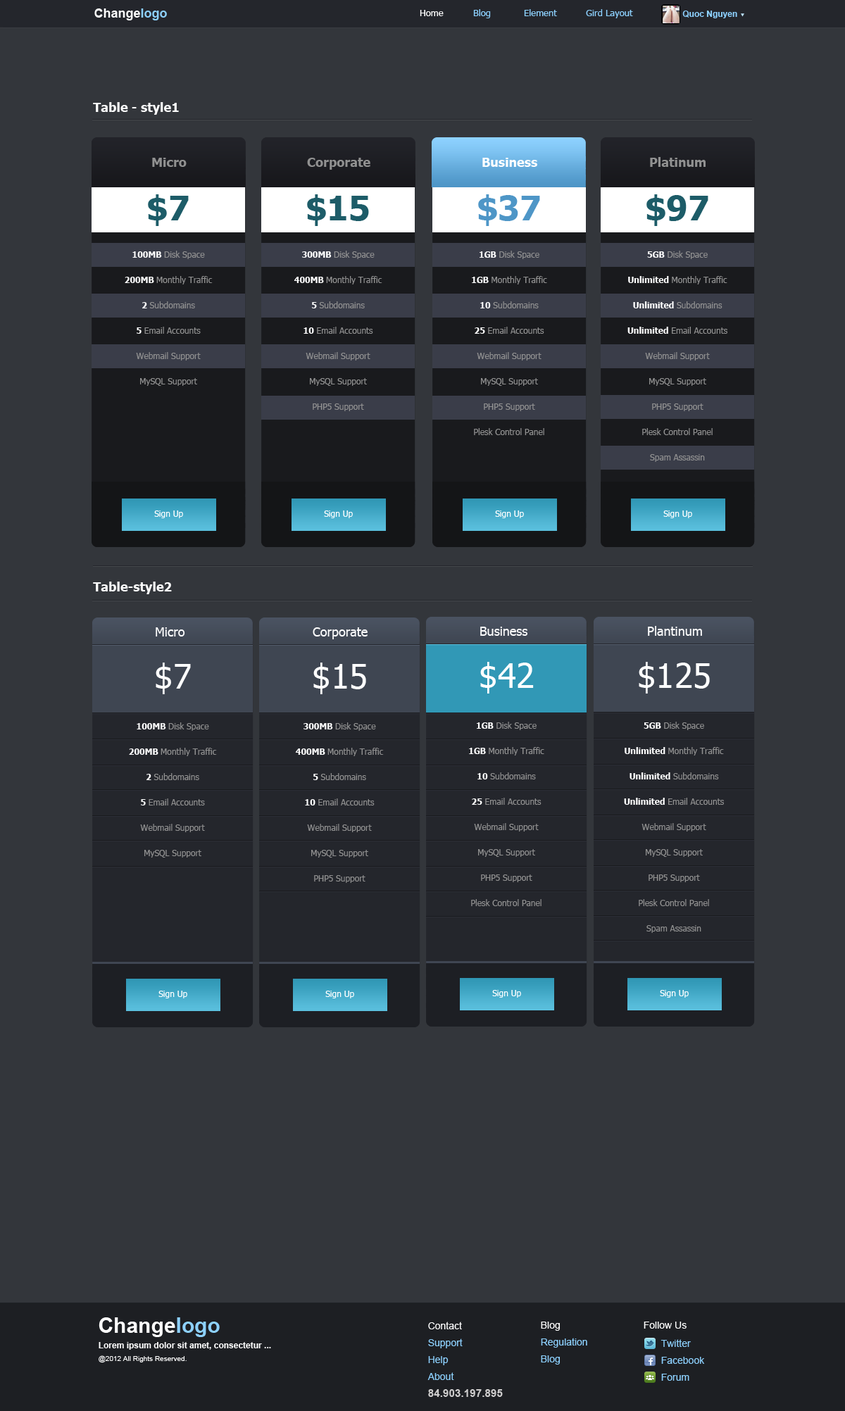
<style>
.page{position:relative;width:845px;height:1411px;background:#33363b}
.page>*{position:absolute;margin:0}
.t1{font:12.7px "Arial-BoldMT";color:#ffffff}
.t2{font:12.7px "Arial-BoldMT";color:#8dd1ff}
.t3{font:9.2px "Tahoma";color:#8dd1ff}
.t4{font:9.2px "Tahoma";color:#ffffff}
.t5{font:8.5px "Arial-BoldMT";color:#8dd1ff}
.t6{font:12.7px "Tahoma-Bold";color:#ffffff}
.t7{font:12.7px "Tahoma-Bold";color:#919191}
.t8{font:33.8px "Tahoma-Bold";color:#1d5c68}
.t9{font:33.8px "Tahoma-Bold";color:#4e96c7}
.t10{font:8.5px/25.4px "Tahoma";color:#919191}
.t11{font:8.5px/25.4px "Tahoma-Bold";color:#ffffff}
.t12{font:8.5px "Tahoma";color:#ffffff}
.t13{font:12.7px "Tahoma";color:#ffffff}
.t14{font:33.8px "Tahoma";color:#ffffff}
.t15{font:21.1px "Arial-BoldMT";color:#ffffff}
.t16{font:21.1px "Arial-BoldMT";color:#8dd1ff}
.t17{font:9.9px/16.9px "ArialMT";color:#8dd1ff}
.t18{font:9.9px/16.9px "ArialMT";color:#ffffff}
.t19{font:10.6px/16.9px "Arial-BoldMT";letter-spacing:0.01em;color:#cecdcd}
.t20{font:9.9px "ArialMT";color:#ffffff}
.t21{font:8.5px/12.7px "Arial-BoldMT";color:#ffffff}
.t22{font:7px/12.7px "ArialMT";color:#ffffff}
</style>
<div class="page">
<p class="t1" style="left:94px;top:8px;width:73px;height:12px">Change<span class="t2">logo</span></p>
<p class="t3" style="left:420px;top:9px;width:213px;height:9px"><span class="t4">Home</span>   Blog    Element      Gird Layout</p>
<p class="t5" style="left:682px;top:11px;width:55px;height:7px">Quoc Nguyen</p>
<p class="t6" style="left:93px;top:102px;width:86px;height:13px">Table - style1</p>
<p class="t7" style="left:152px;top:158px;width:35px;height:9px">Micro</p>
<p class="t7" style="left:307px;top:158px;width:63px;height:12px">Corporate</p>
<p class="t6" style="left:482px;top:158px;width:55px;height:9px">Business</p>
<p class="t7" style="left:650px;top:157px;width:56px;height:10px">Platinum</p>
<p class="t8" style="left:148px;top:194px;width:41px;height:32px">$7</p>
<p class="t8" style="left:307px;top:194px;width:62px;height:32px">$15</p>
<p class="t9" style="left:478px;top:194px;width:62px;height:32px">$37</p>
<p class="t8" style="left:646px;top:194px;width:62px;height:32px">$97</p>
<p class="t10" style="left:125px;top:251px;width:88px;height:135px;text-align:center"><span class="t11">100MB</span> Disk Space<br><span class="t11">200MB </span>Monthly Traffic<br><span class="t11">2</span> Subdomains<br><span class="t11">5</span> Email Accounts<br>Webmail Support<br>MySQL Support</p>
<p class="t10" style="left:294px;top:251px;width:88px;height:160px;text-align:center"><span class="t11">300MB</span> Disk Space<br><span class="t11">400MB </span>Monthly Traffic<br><span class="t11">5</span> Subdomains<br><span class="t11">10</span> Email Accounts<br>Webmail Support<br>MySQL Support<br>PHP5 Support</p>
<p class="t10" style="left:472px;top:251px;width:75px;height:184px;text-align:center"><span class="t11">1GB</span> Disk Space<br><span class="t11">1GB </span>Monthly Traffic<br><span class="t11">10</span> Subdomains<br><span class="t11">25</span> Email Accounts<br>Webmail Support<br>MySQL Support<br>PHP5 Support<br>Plesk Control Panel</p>
<p class="t10" style="left:627px;top:251px;width:100px;height:211px;text-align:center"><span class="t11">5GB</span> Disk Space<br><span class="t11">Unlimited </span>Monthly Traffic<br><span class="t11">Unlimited</span> Subdomains<br><span class="t11">Unlimited</span> Email Accounts<br>Webmail Support<br>MySQL Support<br>PHP5 Support<br>Plesk Control Panel<br>Spam Assassin</p>
<p class="t12" style="left:154px;top:511px;width:29px;height:7px">Sign Up</p>
<p class="t12" style="left:324px;top:511px;width:29px;height:7px">Sign Up</p>
<p class="t12" style="left:495px;top:511px;width:29px;height:7px">Sign Up</p>
<p class="t12" style="left:663px;top:511px;width:29px;height:7px">Sign Up</p>
<p class="t6" style="left:93px;top:582px;width:79px;height:12px">Table-style2</p>
<p class="t13" style="left:156px;top:627px;width:29px;height:10px">Micro</p>
<p class="t13" style="left:313px;top:627px;width:55px;height:12px">Corporate</p>
<p class="t13" style="left:480px;top:627px;width:47px;height:9px">Business</p>
<p class="t13" style="left:648px;top:626px;width:54px;height:10px">Plantinum</p>
<p class="t14" style="left:156px;top:663px;width:35px;height:31px">$7</p>
<p class="t14" style="left:313px;top:663px;width:53px;height:31px">$15</p>
<p class="t14" style="left:480px;top:662px;width:54px;height:32px">$42</p>
<p class="t14" style="left:639px;top:662px;width:71px;height:32px">$125</p>
<p class="t10" style="left:129px;top:722px;width:88px;height:136px;text-align:center"><span class="t11">100MB</span> Disk Space<br><span class="t11">200MB </span>Monthly Traffic<br><span class="t11">2</span> Subdomains<br><span class="t11">5</span> Email Accounts<br>Webmail Support<br>MySQL Support</p>
<p class="t10" style="left:295px;top:722px;width:89px;height:161px;text-align:center"><span class="t11">300MB</span> Disk Space<br><span class="t11">400MB </span>Monthly Traffic<br><span class="t11">5</span> Subdomains<br><span class="t11">10</span> Email Accounts<br>Webmail Support<br>MySQL Support<br>PHP5 Support</p>
<p class="t10" style="left:469px;top:722px;width:75px;height:184px;text-align:center"><span class="t11">1GB</span> Disk Space<br><span class="t11">1GB </span>Monthly Traffic<br><span class="t11">10</span> Subdomains<br><span class="t11">25</span> Email Accounts<br>Webmail Support<br>MySQL Support<br>PHP5 Support<br>Plesk Control Panel</p>
<p class="t10" style="left:624px;top:722px;width:100px;height:211px;text-align:center"><span class="t11">5GB</span> Disk Space<br><span class="t11">Unlimited </span>Monthly Traffic<br><span class="t11">Unlimited</span> Subdomains<br><span class="t11">Unlimited</span> Email Accounts<br>Webmail Support<br>MySQL Support<br>PHP5 Support<br>Plesk Control Panel<br>Spam Assassin</p>
<p class="t12" style="left:158px;top:991px;width:29px;height:8px">Sign Up</p>
<p class="t12" style="left:325px;top:991px;width:29px;height:8px">Sign Up</p>
<p class="t12" style="left:492px;top:990px;width:29px;height:8px">Sign Up</p>
<p class="t12" style="left:660px;top:990px;width:29px;height:8px">Sign Up</p>
<p class="t15" style="left:99px;top:1318px;width:121px;height:19px">Change<span class="t16">logo</span></p>
<p class="t17" style="left:427px;top:1322px;width:76px;height:75px"><span class="t18">Contact<br></span>Support<br>Help<br>About<br><span class="t19">84.903.197.895</span></p>
<p class="t17" style="left:541px;top:1322px;width:46px;height:43px"><span class="t18">Blog<br></span>Regulation<br>Blog</p>
<p class="t20" style="left:644px;top:1322px;width:43px;height:7px">Follow Us</p>
<p class="t21" style="left:99px;top:1342px;width:172px;height:21px">Lorem ipsum dolor sit amet, consectetur ...<br><span class="t22">@2012 All Rights Reserved.</span></p>
<p class="t17" style="left:661px;top:1339px;width:44px;height:42px">Twitter<br>Facebook<br>Forum</p>
</div>
